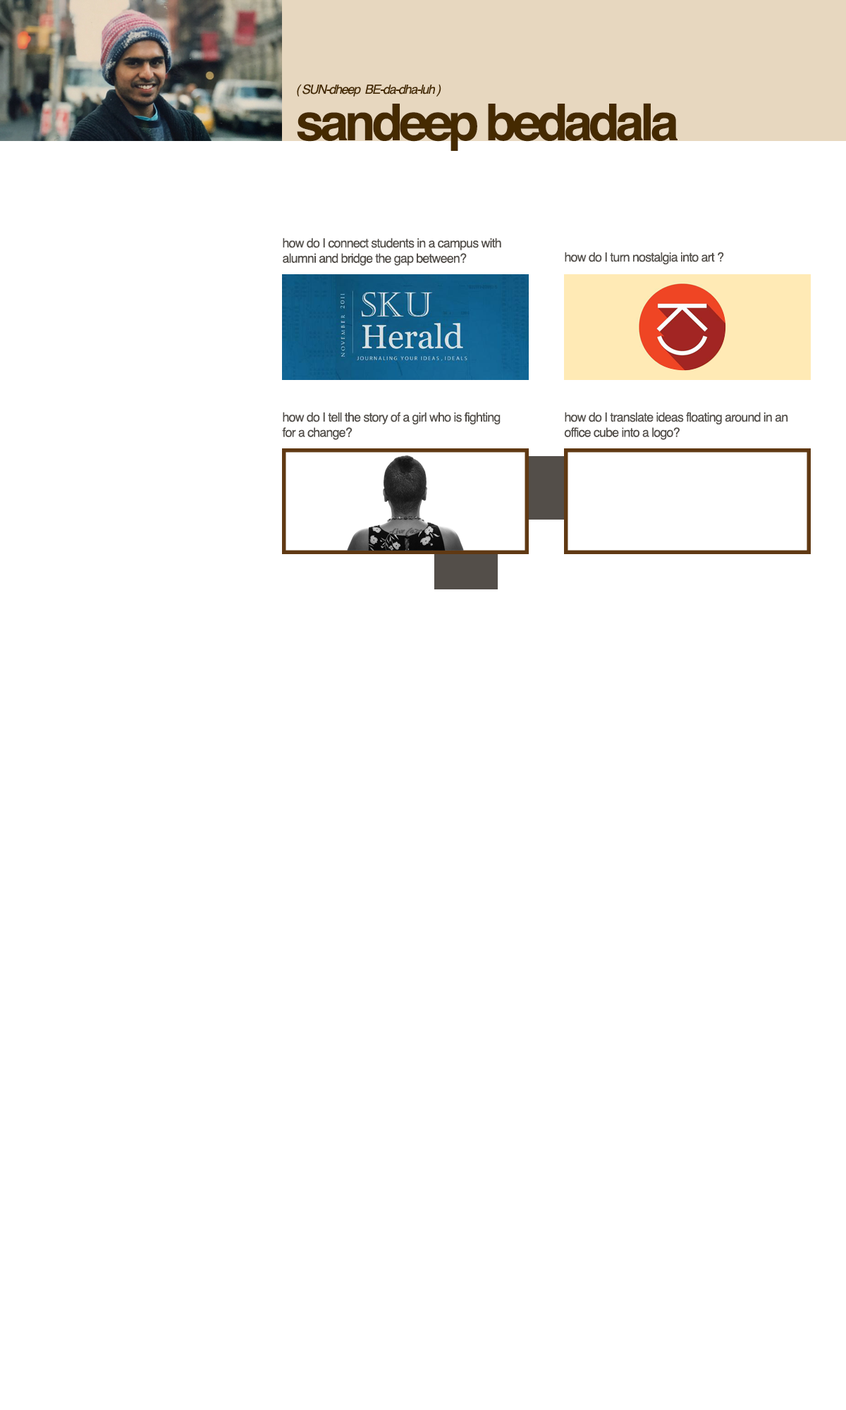
<style>
.page{position:relative;width:846px;height:1410px;background:#ffffff}
.page>*{position:absolute;margin:0}
.t1{font:12.7px "Helvetica-Oblique";letter-spacing:-0.075em;color:#452a01}
.t2{font:50.8px "Helvetica-Bold";letter-spacing:-0.075em;color:#452a01}
.t3{font:12.7px "Helvetica";letter-spacing:-0.05em;color:#524e49}
</style>
<div class="page">
<p class="t1" style="left:297px;top:84px;width:144px;height:13px">( SUN-dheep  BE-da-dha-luh )</p>
<p class="t2" style="left:297px;top:103px;width:380px;height:48px">sandeep bedadala</p>
<p class="t3" style="left:283px;top:238px;width:218px;height:28px">how do I connect students in a campus with<br>alumni and bridge the gap between?</p>
<p class="t3" style="left:565px;top:252px;width:159px;height:12px">how do I turn nostalgia into art ?</p>
<p class="t3" style="left:282px;top:412px;width:218px;height:28px">how do I tell the story of a girl who is fighting for a change?</p>
<p class="t3" style="left:564px;top:412px;width:224px;height:28px">how do I translate ideas floating around in an office cube into a logo?</p>
</div>
